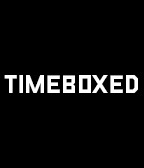
<style>
.page{position:relative;width:144px;height:168px;background:#000000}
.page>*{position:absolute;margin:0}
.t1{font:25px "LECO1976-Regular";color:#ffffff}
</style>
<div class="page">
<p class="t1" style="left:4px;top:75px;width:134px;height:18px">TIMEBOXED</p>
</div>
